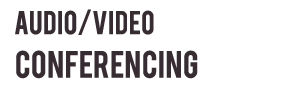
<style>
.page{position:relative;width:300px;height:98px;background:#ffffff}
.page>*{position:absolute;margin:0}
.t1{font:26px "Bebas";color:#362c32}
.t2{font:30px "Bebas";color:#362c32}
</style>
<div class="page">
<p class="t1" style="left:15px;top:9px;width:139px;height:26px">Audio/video</p>
<p class="t2" style="left:16px;top:50px;width:182px;height:29px">Conferencing</p>
</div>
